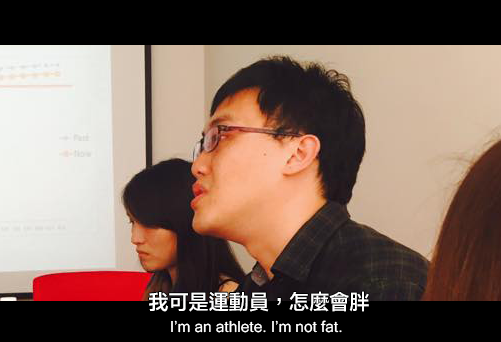
<style>
.page{position:relative;width:501px;height:342px;background:#000000}
.page>*{position:absolute;margin:0}
.t1{font:20.7px "FZLTZHB--B51-0";color:#ffffff}
.t2{font:15.4px "MicrosoftSansSerif";color:#ffffff}
</style>
<div class="page">
<p class="t1" style="left:149px;top:291px;width:220px;height:21px">我可是運動員，怎麼會胖</p>
<p class="t2" style="left:171px;top:320px;width:171px;height:13px">I’m an athlete. I’m not fat.</p>
</div>
